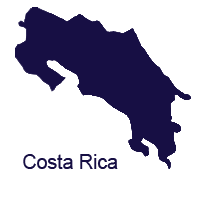
<style>
.page{position:relative;width:200px;height:200px;background:#ffffff}
.page>*{position:absolute;margin:0}
.t1{font:20.8px "ArialMT";color:#170f44;scale:0.94 1}
</style>
<div class="page">
<p class="t1" style="left:23px;top:154px;width:95px;height:15px">Costa Rica</p>
</div>
